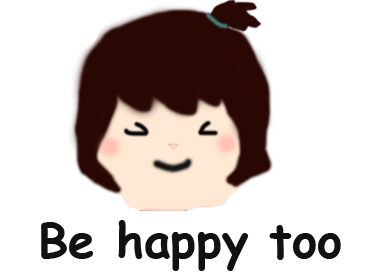
<style>
.page{position:relative;width:380px;height:279px;background:#ffffff}
.page>*{position:absolute;margin:0}
.t1{font:48px "ComicSansMS-Bold";color:#111111}
</style>
<div class="page">
<p class="t1" style="left:41px;top:220px;width:300px;height:51px">Be happy too</p>
</div>
